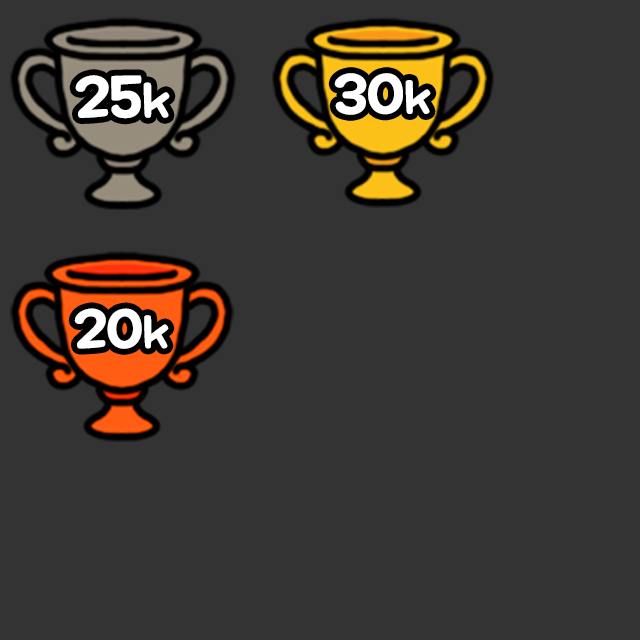
<style>
.page{position:relative;width:640px;height:640px;background:#333333}
.page>*{position:absolute;margin:0}
.t1{font:57.3px "MaplestoryBold";color:#ffffff}
.t2{font:45.9px "MaplestoryBold";color:#ffffff}
.t3{font:55px "MaplestoryBold";color:#ffffff}
.t4{font:44px "MaplestoryBold";color:#ffffff}
.t5{font:53.8px "MaplestoryBold";color:#ffffff}
.t6{font:43px "MaplestoryBold";color:#ffffff}
</style>
<div class="page">
<p class="t1" style="left:75px;top:75px;width:95px;height:44px">25<span class="t2">k</span></p>
<p class="t3" style="left:334px;top:73px;width:97px;height:42px">30<span class="t4">k</span></p>
<p class="t5" style="left:74px;top:308px;width:95px;height:41px">20<span class="t6">k</span></p>
</div>
